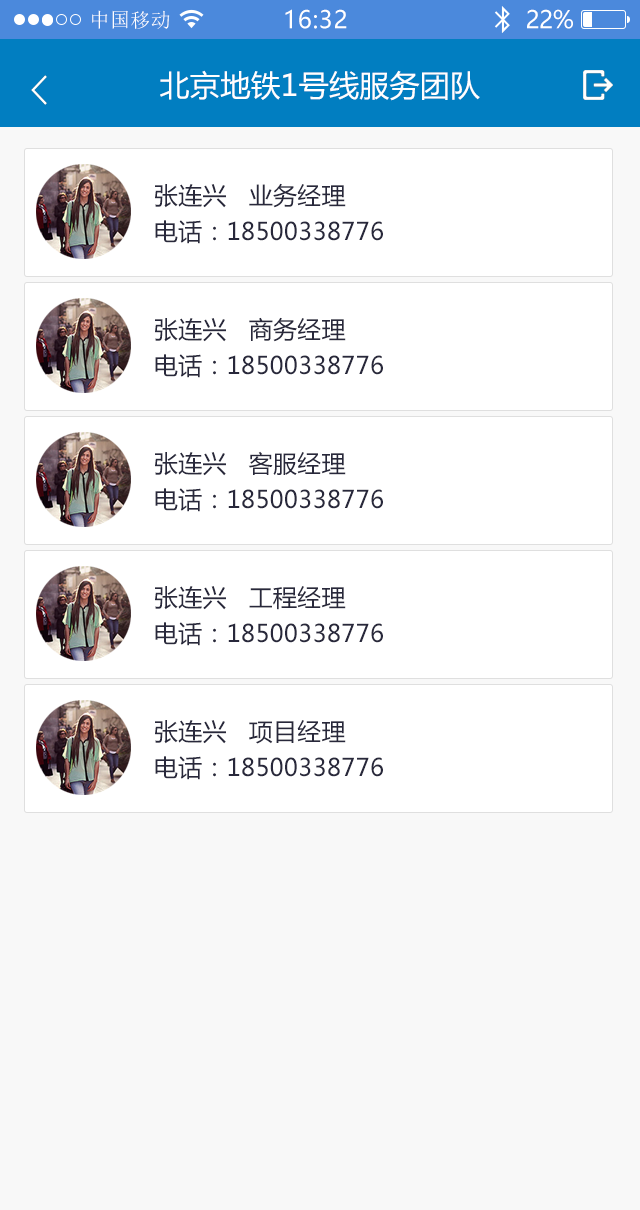
<style>
.page{position:relative;width:640px;height:1210px;background:#ffffff}
.page>*{position:absolute;margin:0}
.t1{font:20px "SimSun";letter-spacing:0.02em;color:#ffffff}
.t2{font:24px "MicrosoftYaHei";letter-spacing:0.025em;color:#ffffff}
.t3{font:24px "MicrosoftYaHei";letter-spacing:-0.02em;color:#ffffff}
.t4{font:30px "MicrosoftYaHei";letter-spacing:0.01em;color:#ffffff}
.t5{font:24px/36px "MicrosoftYaHei";letter-spacing:0.01em;color:#28283b}
</style>
<div class="page">
<p class="t1" style="left:92px;top:10px;width:78px;height:19px">中国移动</p>
<p class="t2" style="left:285px;top:9px;width:62px;height:20px">16:32</p>
<p class="t3" style="left:527px;top:9px;width:46px;height:20px">22%</p>
<p class="t4" style="left:160px;top:70px;width:320px;height:31px">北京地铁1号线服务团队</p>
<p class="t5" style="left:155px;top:183px;width:228px;height:61px">张连兴   业务经理<br>电话：18500338776</p>
<p class="t5" style="left:155px;top:317px;width:228px;height:61px">张连兴   商务经理<br>电话：18500338776</p>
<p class="t5" style="left:155px;top:451px;width:228px;height:61px">张连兴   客服经理<br>电话：18500338776</p>
<p class="t5" style="left:155px;top:586px;width:228px;height:60px">张连兴   工程经理<br>电话：18500338776</p>
<p class="t5" style="left:155px;top:720px;width:228px;height:60px">张连兴   项目经理<br>电话：18500338776</p>
</div>
